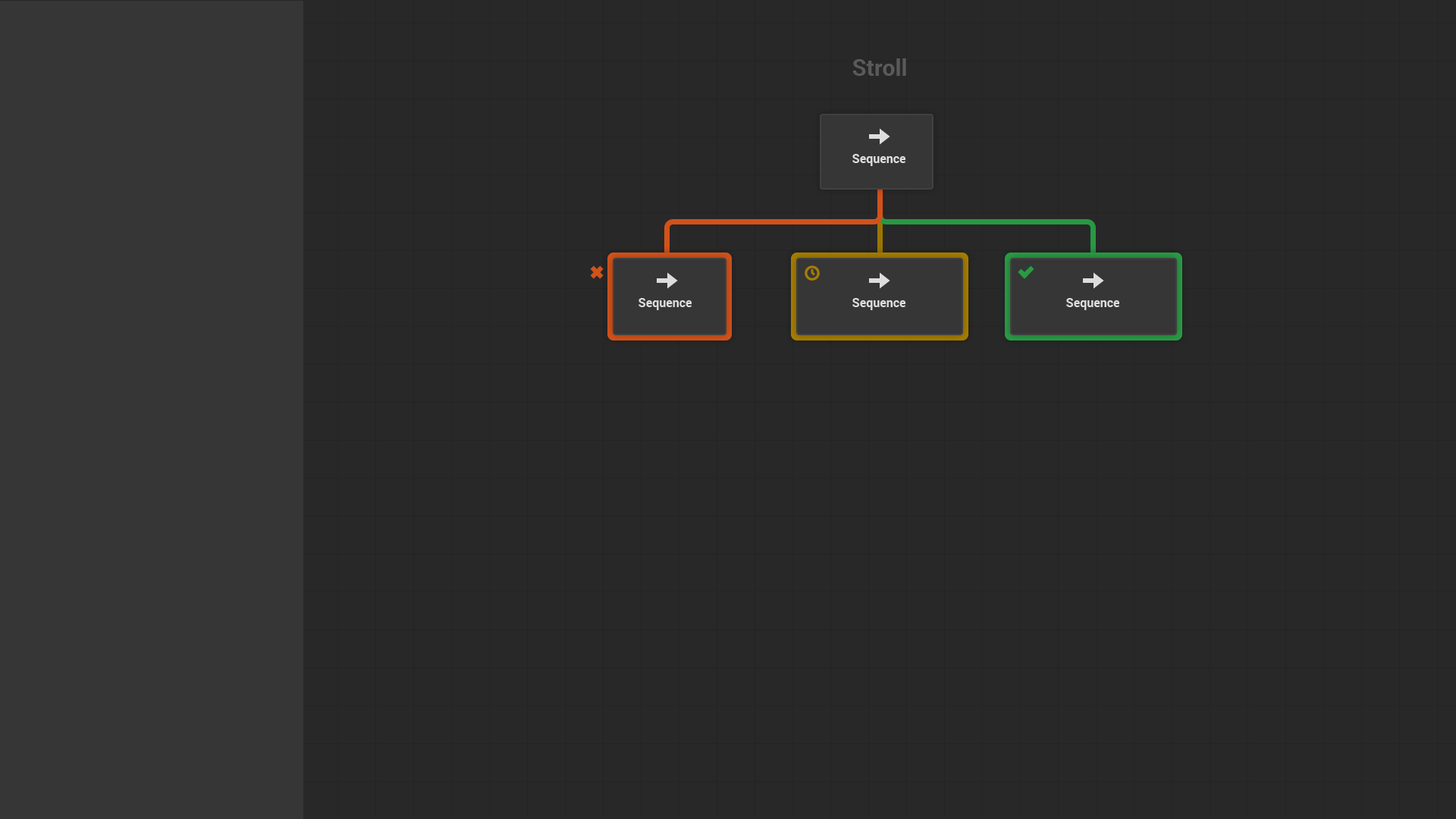
<style>
.page{position:relative;width:1456px;height:819px;background:#282828}
.page>*{position:absolute;margin:0}
.t1{font:22.7px "Roboto-Bold";color:#5b5b5b}
.t2{font:12.1px "Roboto-Bold";color:#dddddd}
</style>
<div class="page">
<p class="t1" style="left:852px;top:58px;width:54px;height:18px">Stroll</p>
<p class="t2" style="left:852px;top:154px;width:53px;height:12px">Sequence</p>
<p class="t2" style="left:639px;top:298px;width:53px;height:12px">Sequence</p>
<p class="t2" style="left:852px;top:298px;width:53px;height:12px">Sequence</p>
<p class="t2" style="left:1066px;top:298px;width:53px;height:12px">Sequence</p>
</div>
